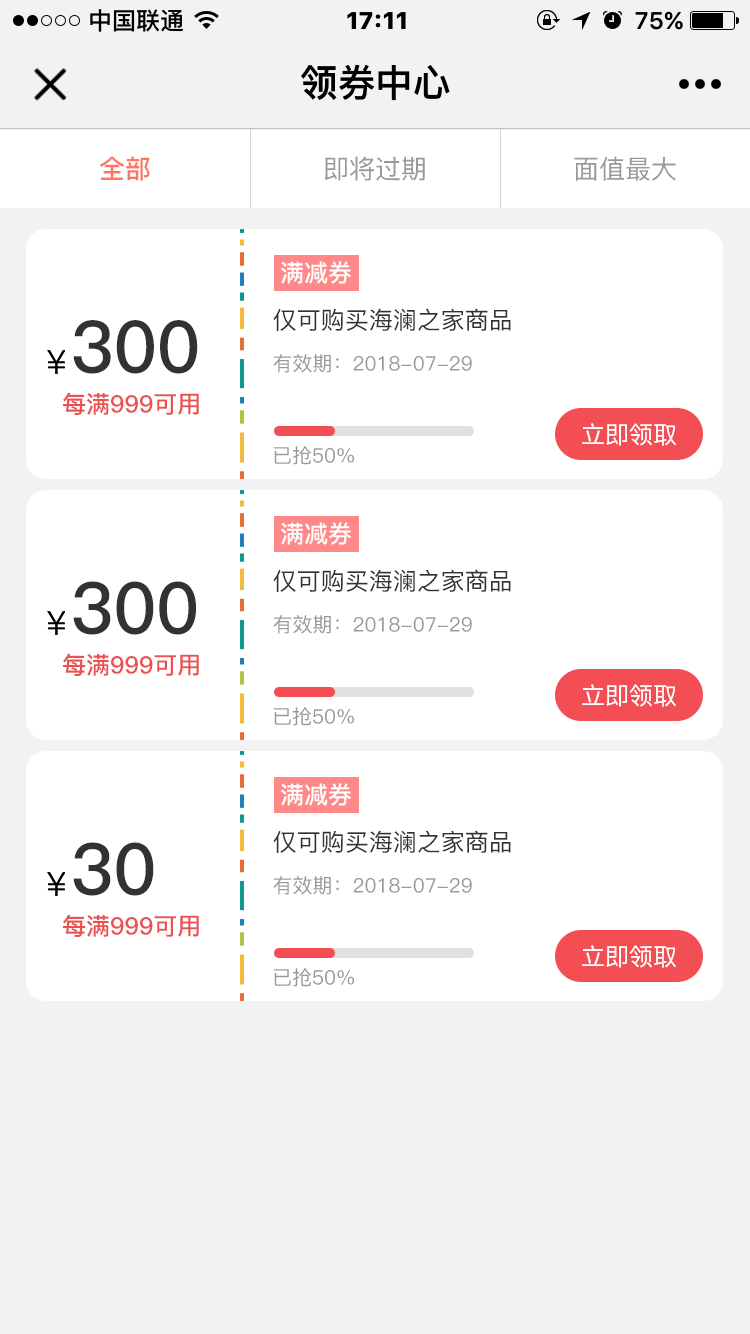
<style>
.page{position:relative;width:750px;height:1334px;background:#ffffff}
.page>*{position:absolute;margin:0}
.t1{font:37.6px "PingFang-SC-Heavy";color:#000000}
.t2{font:26px "PingFang-SC-Bold";color:#fd7662}
.t3{font:26px "PingFang-SC-Medium";color:#999999}
.t4{font:24px "PingFang-SC-Bold";color:#ffffff}
.t5{font:24px "PingFang-SC-Medium";color:#323232}
.t6{font:72px "PingFang-SC-Bold";color:#323232}
.t7{font:20px "PingFang-SC-Medium";color:#999999}
.t8{font:24px "PingFang-SC-Bold";color:#ec5151}
.t9{font:24px "PingFang-SC-Medium";color:#ffffff}
.t10{font:71.4px "PingFang-SC-Bold";color:#323232}
</style>
<div class="page">
<p class="t1" style="left:301px;top:64px;width:149px;height:37px">领券中心</p>
<p class="t2" style="left:100px;top:156px;width:50px;height:25px">全部</p>
<p class="t3" style="left:324px;top:156px;width:101px;height:25px">即将过期</p>
<p class="t3" style="left:574px;top:156px;width:102px;height:25px">面值最大</p>
<p class="t4" style="left:280px;top:261px;width:72px;height:23px">满减券</p>
<p class="t5" style="left:273px;top:308px;width:238px;height:23px">仅可购买海澜之家商品</p>
<p class="t6" style="left:73px;top:320px;width:125px;height:54px">300</p>
<p class="t7" style="left:273px;top:354px;width:199px;height:19px">有效期：2018-07-29</p>
<p class="t8" style="left:63px;top:392px;width:136px;height:23px">每满999可用</p>
<p class="t9" style="left:582px;top:423px;width:94px;height:23px">立即领取</p>
<p class="t7" style="left:273px;top:446px;width:81px;height:19px">已抢50%</p>
<p class="t4" style="left:280px;top:522px;width:72px;height:23px">满减券</p>
<p class="t5" style="left:273px;top:569px;width:238px;height:23px">仅可购买海澜之家商品</p>
<p class="t10" style="left:73px;top:581px;width:123px;height:54px">300</p>
<p class="t7" style="left:273px;top:615px;width:199px;height:19px">有效期：2018-07-29</p>
<p class="t8" style="left:63px;top:653px;width:136px;height:23px">每满999可用</p>
<p class="t9" style="left:582px;top:684px;width:94px;height:23px">立即领取</p>
<p class="t7" style="left:273px;top:707px;width:81px;height:19px">已抢50%</p>
<p class="t4" style="left:280px;top:783px;width:72px;height:23px">满减券</p>
<p class="t5" style="left:273px;top:830px;width:238px;height:23px">仅可购买海澜之家商品</p>
<p class="t10" style="left:73px;top:842px;width:81px;height:54px">30</p>
<p class="t7" style="left:273px;top:876px;width:199px;height:19px">有效期：2018-07-29</p>
<p class="t8" style="left:63px;top:914px;width:136px;height:23px">每满999可用</p>
<p class="t9" style="left:582px;top:945px;width:94px;height:23px">立即领取</p>
<p class="t7" style="left:273px;top:968px;width:81px;height:19px">已抢50%</p>
</div>
